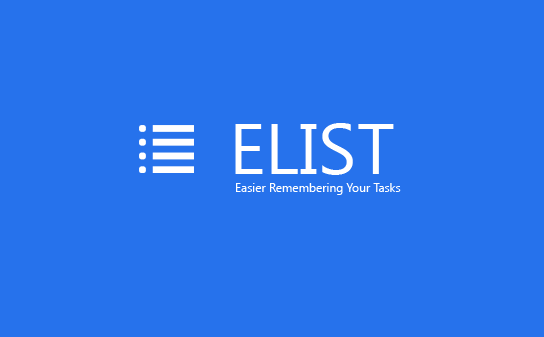
<style>
.page{position:relative;width:544px;height:337px;background:#2672ec}
.page>*{position:absolute;margin:0}
.t1{font:72px "SegoeUISymbol";color:#ffffff}
.t2{font:12px "SegoeUISymbol";color:#ffffff}
</style>
<div class="page">
<p class="t1" style="left:235px;top:123px;width:159px;height:52px">ELIST</p>
<p class="t2" style="left:236px;top:183px;width:165px;height:12px">Easier Remembering Your Tasks</p>
</div>
